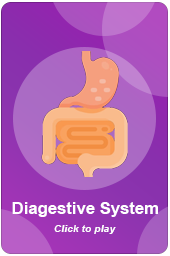
<style>
.page{position:relative;width:170px;height:256px}
.page>*{position:absolute;margin:0}
.t1{font:16.7px "Arial-BoldMT";color:#ffffff}
.t2{font:10.4px "Arial-BoldItalicMT";color:#ffffff}
</style>
<div class="page">
<p class="t1" style="left:12px;top:202px;width:146px;height:15px">Diagestive System</p>
<p class="t2" style="left:54px;top:225px;width:62px;height:9px">Click to play</p>
</div>
